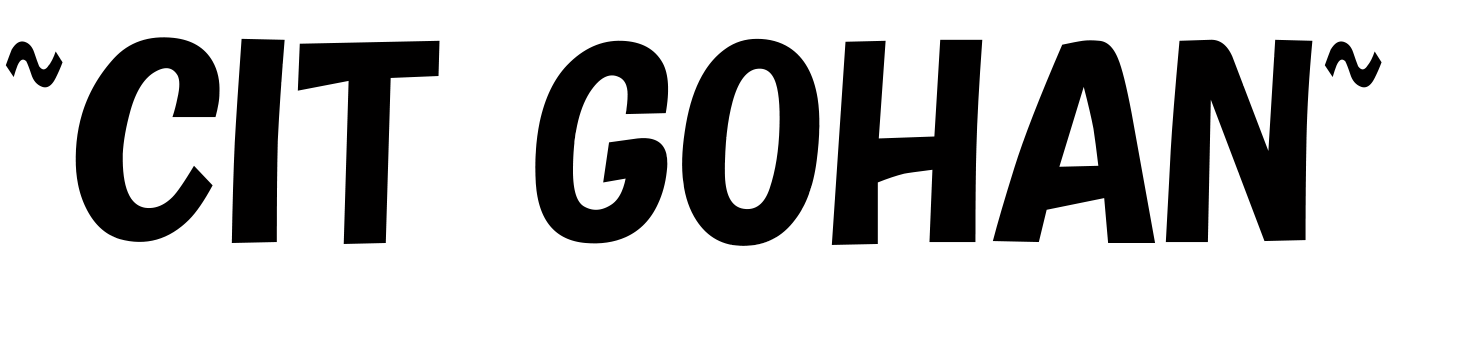
<style>
.page{position:relative;width:1482px;height:363px;background:#ffffff}
.page>*{position:absolute;margin:0}
.t1{font:250px "HGPSoeiKakupoptai";color:#010000}
</style>
<div class="page">
<p class="t1" style="left:5px;top:37px;width:1377px;height:209px">~CIT GOHAN~</p>
</div>
